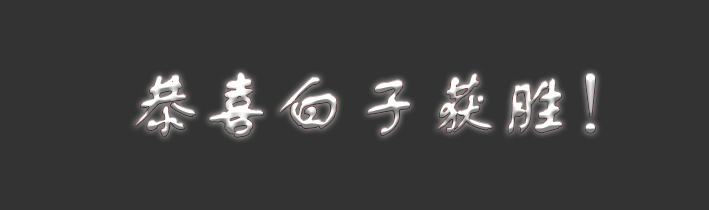
<style>
.page{position:relative;width:709px;height:210px;background:#333333}
.page>*{position:absolute;margin:0}
.t1{font:72px "FZSTK--GBK1-0";font-weight:bold}
</style>
<div class="page">
<p class="t1" style="left:134px;top:72px;width:462px;height:66px">恭喜白子获胜！</p>
</div>
